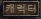
<style>
.page{position:relative;width:41px;height:19px}
.page>*{position:absolute;margin:0}
.t1{font:10px "NanumBarunGothicLight";letter-spacing:0.2em;color:#8c7b69}
</style>
<div class="page">
<p class="t1" style="left:5px;top:4px;width:31px;height:10px">캐릭터</p>
</div>
